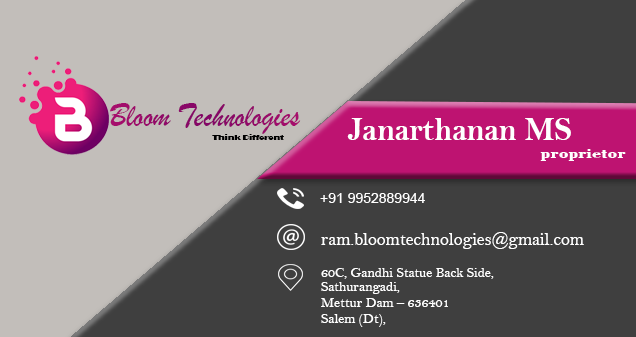
<style>
.page{position:relative;width:636px;height:337px;background:#3f3f3f}
.page>*{position:absolute;margin:0}
.t1{font:35.2px "BrushScriptMT";color:#920969;scale:0.88 1}
.t2{font:34.1px "BellMTBold";color:#ffffff;scale:0.93 1}
.t3{font:7.2px "Broadway";color:#000000;scale:1.2 1}
.t4{font:14.3px "BodoniMTCondensed-Bold";color:#ffffff;scale:1.68 1}
.t5{font:14px "ArialMT";color:#ffffff}
.t6{font:18px "BellMT";color:#ffffff}
.t7{font:14px/14px "BellMT";color:#ffffff}
.t8{font:14px/8px "BellMT";color:#ffffff}
</style>
<div class="page">
<p class="t1" style="left:110px;top:103px;width:191px;height:31px">Bloom Technologies</p>
<p class="t2" style="left:347px;top:118px;width:224px;height:22px">Janarthanan MS</p>
<p class="t3" style="left:212px;top:134px;width:72px;height:6px">Think Different</p>
<p class="t4" style="left:540px;top:149px;width:86px;height:12px">proprietor</p>
<p class="t5" style="left:320px;top:193px;width:105px;height:10px">+91 9952889944</p>
<p class="t6" style="left:321px;top:232px;width:263px;height:17px">ram.bloomtechnologies@gmail.com</p>
<p class="t7" style="left:321px;top:268px;width:173px;height:59px">60C, Gandhi Statue Back Side,<br>Sathurangadi,<br><span class="t8">    <br>Mettur Dam – 636401<br><br>Salem (Dt),</span></p>
</div>
